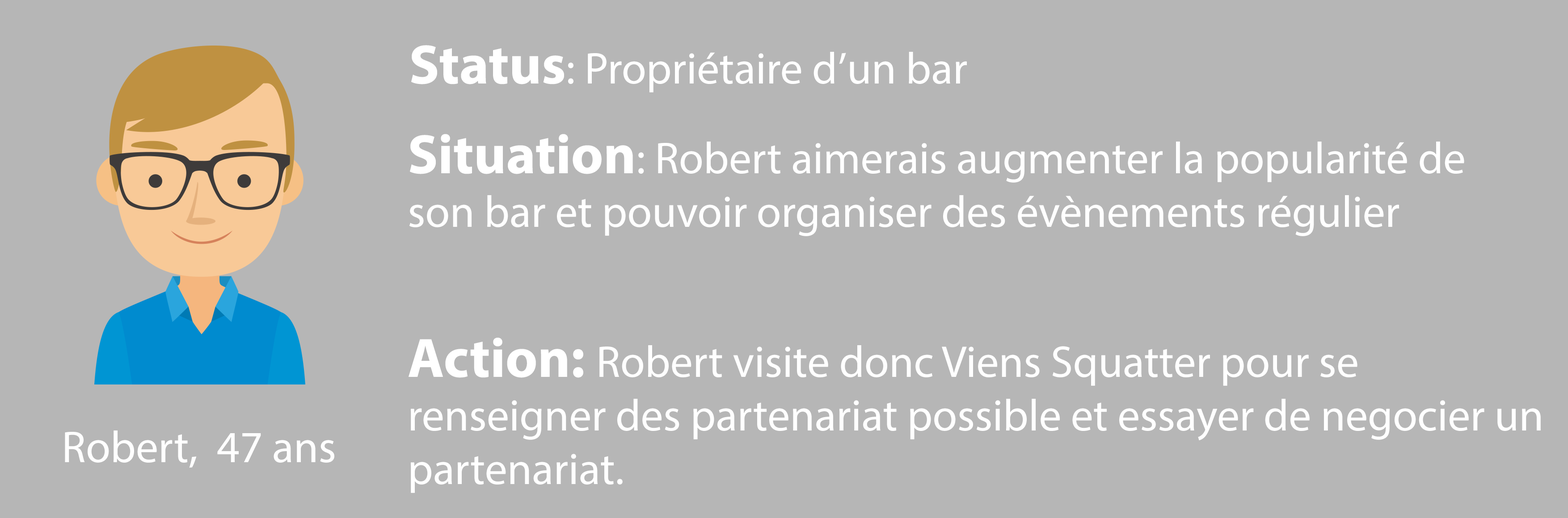
<style>
.page{position:relative;width:1568px;height:518px;background:#b6b6b6}
.page>*{position:absolute;margin:0}
.t1{font:44.7px "MyriadPro-Regular";color:#ffffff}
.t2{font:55.9px "MyriadPro-Bold";color:#ffffff}
</style>
<div class="page">
<p class="t1" style="left:411px;top:45px;width:556px;height:48px"><span class="t2">Status</span>: Propriétaire d’un bar</p>
<p class="t1" style="left:409px;top:134px;width:1055px;height:102px"><span class="t2">Situation</span>: Robert aimerais augmenter la popularité de <br>son bar et pouvoir organiser des évènements régulier</p>
<p class="t1" style="left:409px;top:338px;width:1132px;height:155px"><span class="t2">Action: </span>Robert visite donc Viens Squatter pour se <br>renseigner des partenariat possible et essayer de negocier un<br>partenariat.</p>
<p class="t1" style="left:65px;top:431px;width:269px;height:37px">Robert,  47 ans</p>
</div>
